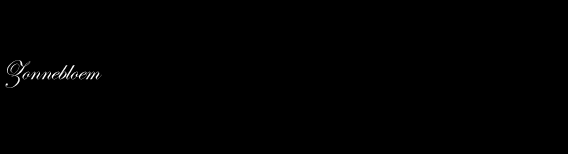
<style>
.page{position:relative;width:568px;height:154px;background:#000000}
.page>*{position:absolute;margin:0}
.t1{font:27.8px "EdwardianScriptITC";color:#ffffff}
</style>
<div class="page">
<p class="t1" style="left:5px;top:60px;width:97px;height:28px">Zonnebloem</p>
</div>
